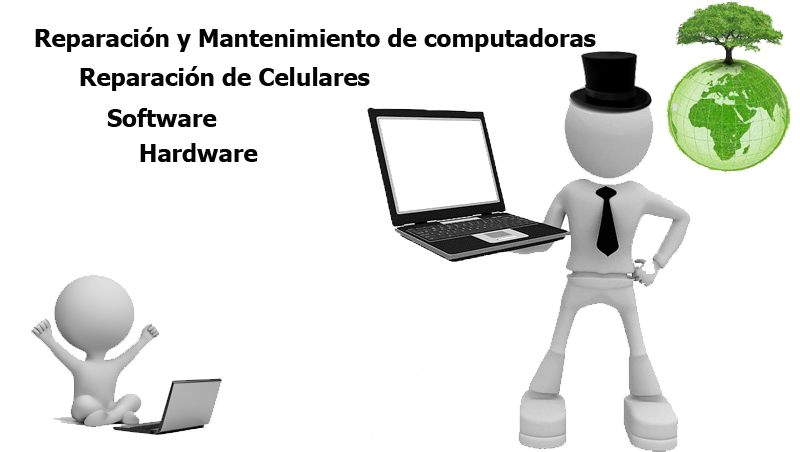
<style>
.page{position:relative;width:800px;height:452px;background:#ffffff}
.page>*{position:absolute;margin:0}
.t1{font:24px "Tahoma-Bold";color:#050505}
</style>
<div class="page">
<p class="t1" style="left:35px;top:27px;width:561px;height:25px">Reparación y Mantenimiento de computadoras</p>
<p class="t1" style="left:80px;top:66px;width:290px;height:25px">Reparación de Celulares</p>
<p class="t1" style="left:107px;top:108px;width:110px;height:19px">Software</p>
<p class="t1" style="left:140px;top:143px;width:118px;height:19px">Hardware</p>
</div>
